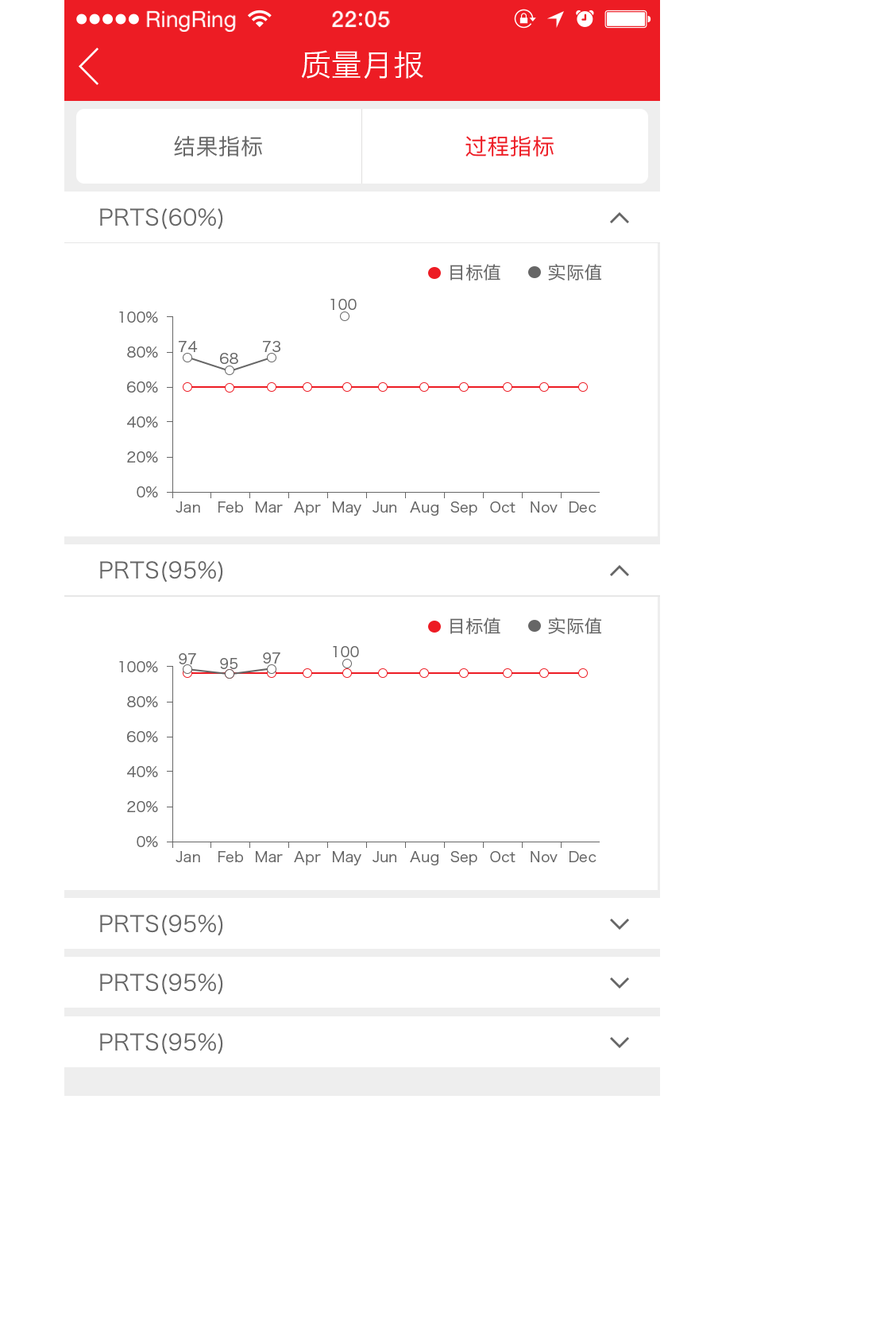
<style>
.page{position:relative;width:888px;height:1343px;background:#ffffff}
.page>*{position:absolute;margin:0}
.t1{font:22.3px "HelveticaNeue";color:#ffffff}
.t2{font:22.3px "HelveticaNeue-Medium";letter-spacing:0.03em;color:#ffffff}
.t3{font:30.7px "HiraginoSansGB-W3";letter-spacing:0.01em;color:#ffffff}
.t4{font:22.2px "PingFangSC-Regular";letter-spacing:0.01em;color:#666666}
.t5{font:22.2px "PingFangSC-Regular";letter-spacing:0.01em;color:#ed1c24}
.t6{font:22.2px "HiraginoSansGB-W3";letter-spacing:0.01em;color:#666666}
.t7{font:17.5px "HiraginoSansGB-W3";letter-spacing:0.01em;color:#666666}
.t8{font:17.5px "HiraginoSansGB-W3";letter-spacing:0.01em;color:#666666;scale:1.03 1}
.t9{font:14.3px "HiraginoSansGB-W3";letter-spacing:0.01em;color:#666666}
</style>
<div class="page">
<p class="t1" style="left:146px;top:10px;width:90px;height:22px">RingRing</p>
<p class="t2" style="left:332px;top:10px;width:58px;height:18px">22 05</p>
<p class="t3" style="left:301px;top:50px;width:122px;height:29px">质量月报</p>
<p class="t4" style="left:174px;top:136px;width:88px;height:21px">结果指标</p>
<p class="t5" style="left:466px;top:136px;width:88px;height:21px">过程指标</p>
<p class="t6" style="left:100px;top:208px;width:123px;height:22px">PRTS(60%)</p>
<p class="t7" style="left:450px;top:264px;width:50px;height:17px">目标值</p>
<p class="t8" style="left:548px;top:264px;width:53px;height:16px">实际值</p>
<p class="t9" style="left:330px;top:299px;width:27px;height:11px">100</p>
<p class="t9" style="left:119px;top:311px;width:39px;height:12px">100%</p>
<p class="t9" style="left:179px;top:341px;width:19px;height:11px">74</p>
<p class="t9" style="left:263px;top:341px;width:17px;height:11px">73</p>
<p class="t9" style="left:127px;top:346px;width:31px;height:11px">80%</p>
<p class="t9" style="left:220px;top:353px;width:18px;height:11px">68</p>
<p class="t9" style="left:127px;top:381px;width:31px;height:11px">60%</p>
<p class="t9" style="left:127px;top:416px;width:31px;height:11px">40%</p>
<p class="t9" style="left:127px;top:451px;width:31px;height:11px">20%</p>
<p class="t9" style="left:137px;top:486px;width:21px;height:11px">0%</p>
<p class="t9" style="left:176px;top:501px;width:24px;height:11px">Jan</p>
<p class="t9" style="left:218px;top:501px;width:25px;height:11px">Feb</p>
<p class="t9" style="left:255px;top:501px;width:28px;height:11px">Mar</p>
<p class="t9" style="left:294px;top:501px;width:27px;height:15px">Apr</p>
<p class="t9" style="left:332px;top:501px;width:29px;height:15px">May</p>
<p class="t9" style="left:373px;top:501px;width:24px;height:11px">Jun</p>
<p class="t9" style="left:410px;top:501px;width:29px;height:15px">Aug</p>
<p class="t9" style="left:450px;top:501px;width:27px;height:15px">Sep</p>
<p class="t9" style="left:490px;top:501px;width:26px;height:11px">Oct</p>
<p class="t9" style="left:531px;top:501px;width:27px;height:11px">Nov</p>
<p class="t9" style="left:569px;top:501px;width:28px;height:11px">Dec</p>
<p class="t6" style="left:100px;top:561px;width:123px;height:21px">PRTS(95%)</p>
<p class="t7" style="left:450px;top:617px;width:50px;height:18px">目标值</p>
<p class="t8" style="left:548px;top:617px;width:53px;height:17px">实际值</p>
<p class="t9" style="left:179px;top:653px;width:17px;height:11px">97</p>
<p class="t9" style="left:263px;top:652px;width:17px;height:11px">97</p>
<p class="t9" style="left:333px;top:646px;width:26px;height:11px">100</p>
<p class="t9" style="left:119px;top:661px;width:39px;height:11px">100%</p>
<p class="t9" style="left:220px;top:658px;width:18px;height:11px">95</p>
<p class="t9" style="left:127px;top:696px;width:31px;height:11px">80%</p>
<p class="t9" style="left:127px;top:731px;width:31px;height:11px">60%</p>
<p class="t9" style="left:127px;top:766px;width:31px;height:11px">40%</p>
<p class="t9" style="left:127px;top:801px;width:31px;height:11px">20%</p>
<p class="t9" style="left:137px;top:836px;width:21px;height:11px">0%</p>
<p class="t9" style="left:176px;top:851px;width:24px;height:11px">Jan</p>
<p class="t9" style="left:218px;top:851px;width:25px;height:11px">Feb</p>
<p class="t9" style="left:255px;top:851px;width:28px;height:11px">Mar</p>
<p class="t9" style="left:294px;top:851px;width:27px;height:14px">Apr</p>
<p class="t9" style="left:332px;top:851px;width:29px;height:14px">May</p>
<p class="t9" style="left:373px;top:851px;width:24px;height:11px">Jun</p>
<p class="t9" style="left:410px;top:851px;width:29px;height:14px">Aug</p>
<p class="t9" style="left:450px;top:851px;width:27px;height:14px">Sep</p>
<p class="t9" style="left:490px;top:851px;width:26px;height:11px">Oct</p>
<p class="t9" style="left:531px;top:851px;width:27px;height:11px">Nov</p>
<p class="t9" style="left:569px;top:851px;width:28px;height:11px">Dec</p>
<p class="t6" style="left:100px;top:914px;width:123px;height:22px">PRTS(95%)</p>
<p class="t6" style="left:100px;top:973px;width:123px;height:22px">PRTS(95%)</p>
<p class="t6" style="left:100px;top:1033px;width:123px;height:21px">PRTS(95%)</p>
</div>
